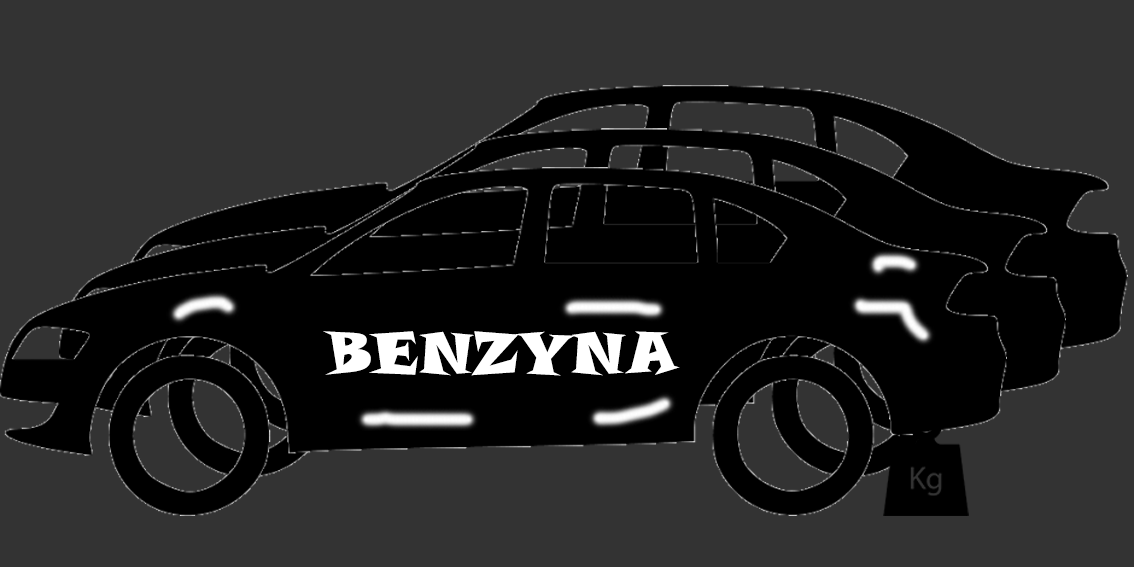
<style>
.page{position:relative;width:1134px;height:567px;background:#333333}
.page>*{position:absolute;margin:0}
.t1{font:57.9px "SnapITC-Regular";color:#ffffff}
</style>
<div class="page">
<p class="t1" style="left:323px;top:331px;width:357px;height:45px">BENZYNA</p>
</div>
